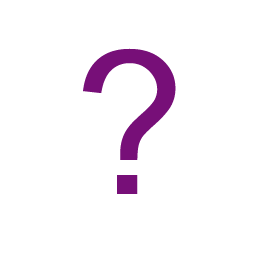
<style>
.page{position:relative;width:256px;height:256px;background:#ffffff}
.page>*{position:absolute;margin:0}
.t1{font:200px "ArialMT";color:#770f78}
</style>
<div class="page">
<p class="t1" style="left:83px;top:48px;width:93px;height:146px">?</p>
</div>
